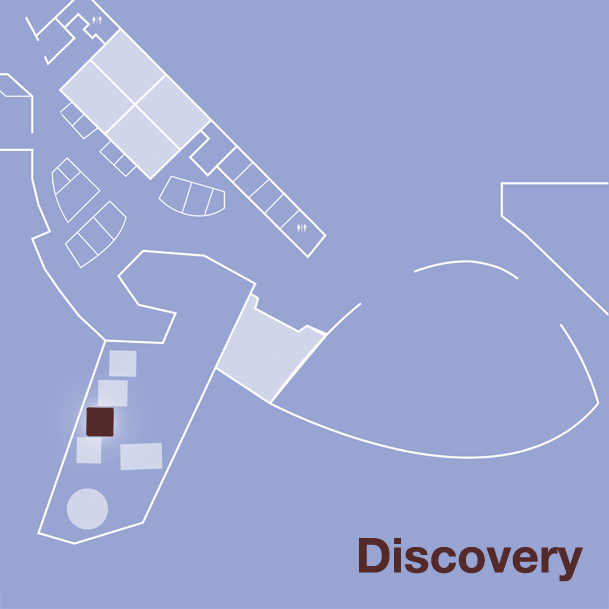
<style>
.page{position:relative;width:609px;height:609px;background:#98a4d2}
.page>*{position:absolute;margin:0}
.t1{font:48px "HelveticaNeue-Bold";color:#532929}
</style>
<div class="page">
<p class="t1" style="left:359px;top:538px;width:224px;height:44px">Discovery</p>
</div>
